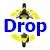
<style>
.page{position:relative;width:50px;height:50px;background:#ffffff}
.page>*{position:absolute;margin:0}
.t1{font:18px "Tahoma-Bold";color:#0000ff}
</style>
<div class="page">
<p class="t1" style="left:4px;top:19px;width:43px;height:17px">Drop</p>
</div>
